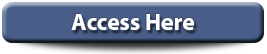
<style>
.page{position:relative;width:267px;height:54px;background:#485e88}
.page>*{position:absolute;margin:0}
.t1{font:23.9px "MyriadPro-Bold";color:#ffffff}
</style>
<div class="page">
<p class="t1" style="left:71px;top:14px;width:123px;height:16px">Access Here</p>
</div>
